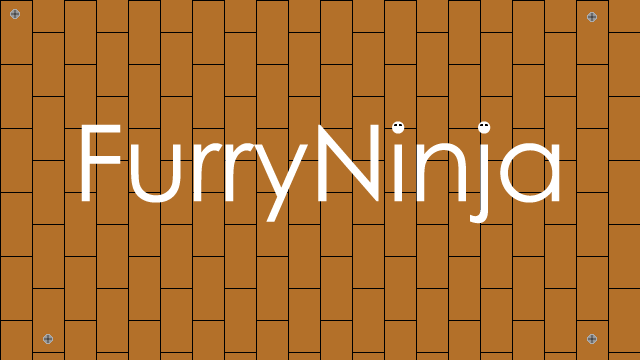
<style>
.page{position:relative;width:640px;height:360px;background:#b37029}
.page>*{position:absolute;margin:0}
.t1{font:106px "CenturyGothic";color:#ffffff}
</style>
<div class="page">
<p class="t1" style="left:81px;top:121px;width:479px;height:103px">FurryNinja</p>
</div>
